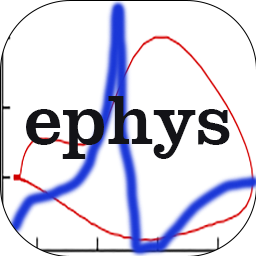
<style>
.page{position:relative;width:256px;height:256px;background:#ffffff}
.page>*{position:absolute;margin:0}
.t1{font:72px "ClarendonBT-Roman";color:#131317}
</style>
<div class="page">
<p class="t1" style="left:26px;top:96px;width:204px;height:63px">ephys</p>
</div>
